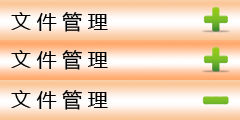
<style>
.page{position:relative;width:240px;height:120px}
.page>*{position:absolute;margin:0}
.t1{font:20px "MicrosoftYaHei";letter-spacing:0.28em;color:#000000}
</style>
<div class="page">
<p class="t1" style="left:11px;top:12px;width:97px;height:20px">文件管理</p>
<p class="t1" style="left:11px;top:50px;width:97px;height:20px">文件管理</p>
<p class="t1" style="left:11px;top:90px;width:97px;height:20px">文件管理</p>
</div>
